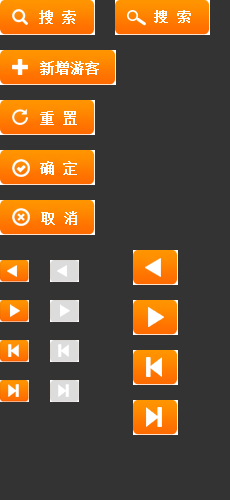
<style>
.page{position:relative;width:230px;height:500px;background:#333333}
.page>*{position:absolute;margin:0}
.t1{font:14px "SimSun";color:#ffffff;font-weight:bold}
</style>
<div class="page">
<p class="t1" style="left:39px;top:10px;width:37px;height:14px">搜 索</p>
<p class="t1" style="left:40px;top:61px;width:59px;height:14px">新增游客</p>
<p class="t1" style="left:40px;top:111px;width:37px;height:14px">重 置</p>
<p class="t1" style="left:40px;top:161px;width:37px;height:14px">确 定</p>
<p class="t1" style="left:41px;top:211px;width:36px;height:14px">取 消</p>
</div>
